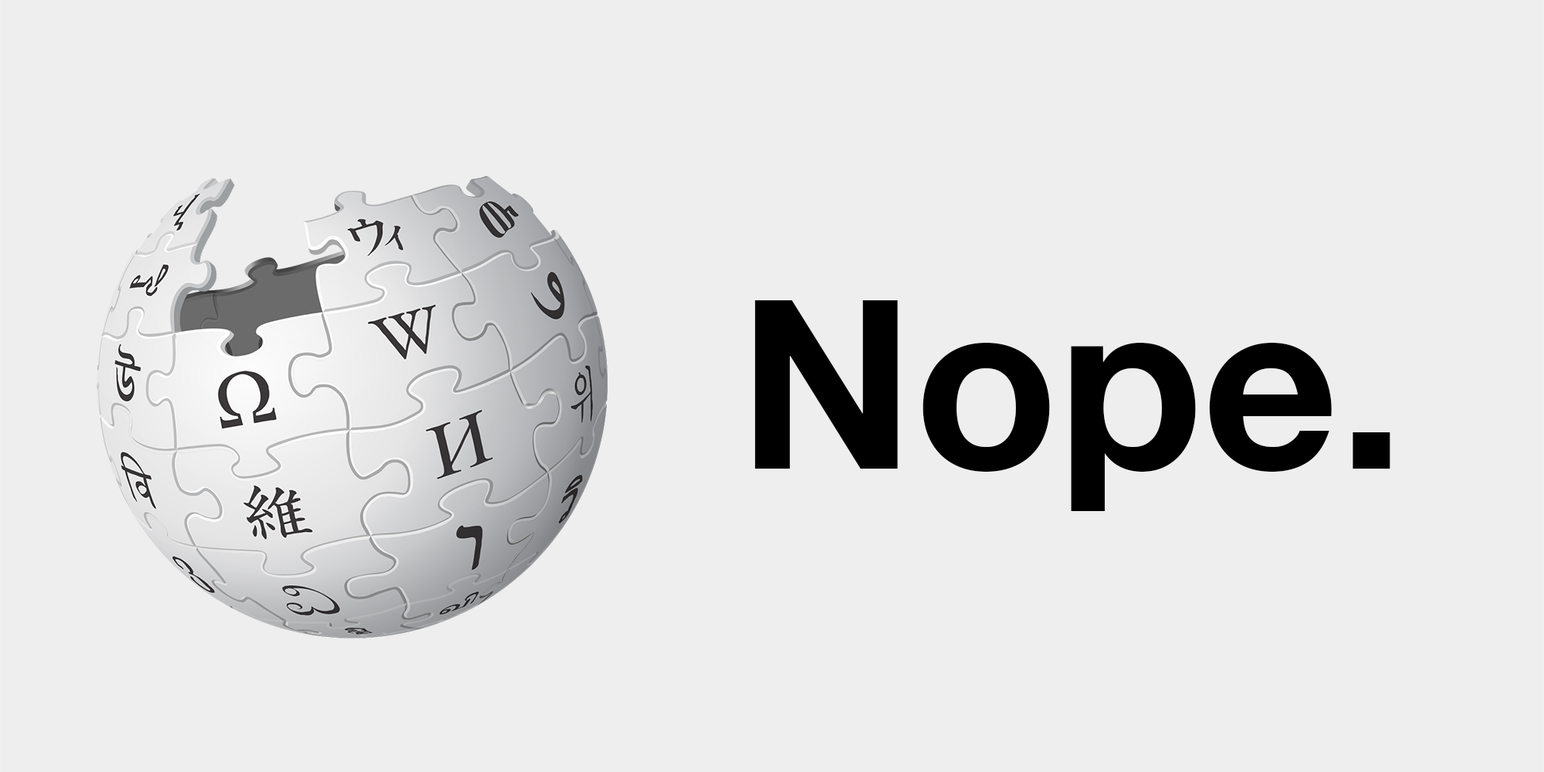
<style>
.page{position:relative;width:1544px;height:772px;background:#eeeeee}
.page>*{position:absolute;margin:0}
.t1{font:236.5px "HelveticaNeue-Bold";color:#000000}
</style>
<div class="page">
<p class="t1" style="left:755px;top:300px;width:636px;height:211px">Nope.</p>
</div>
